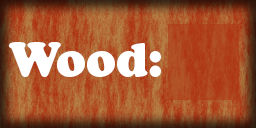
<style>
.page{position:relative;width:256px;height:128px}
.page>*{position:absolute;margin:0}
.t1{font:47.3px "CooperBlackStd";color:#ffffff}
</style>
<div class="page">
<p class="t1" style="left:9px;top:42px;width:152px;height:35px">:Wood</p>
</div>
